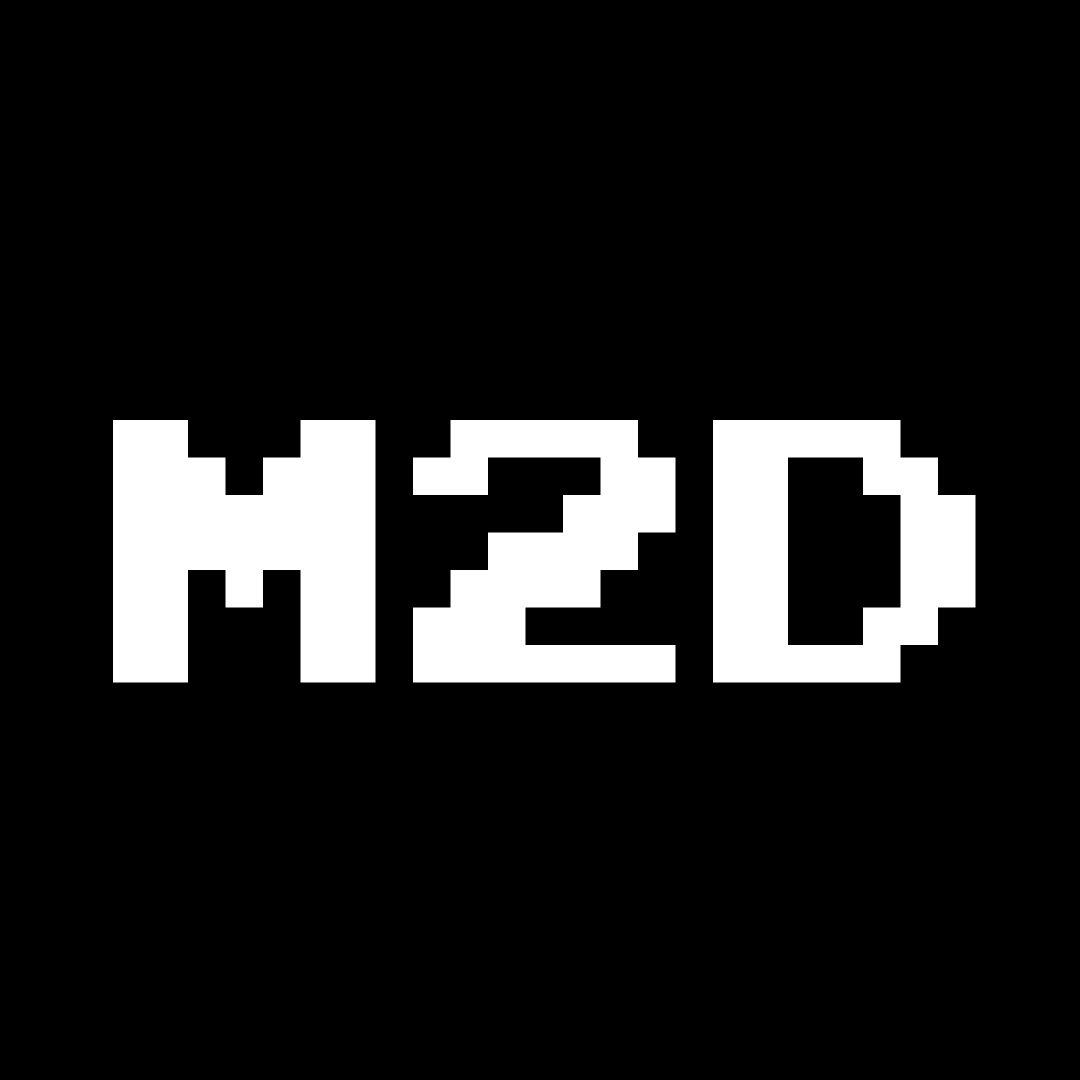
<style>
.page{position:relative;width:1080px;height:1080px;background:#000000}
.page>*{position:absolute;margin:0}
.t1{font:300px "PressStart2P";color:#ffffff}
</style>
<div class="page">
<p class="t1" style="left:113px;top:420px;width:863px;height:263px">M2D</p>
</div>
